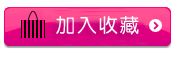
<style>
.page{position:relative;width:179px;height:58px;background:#ffffff}
.page>*{position:absolute;margin:0}
.t1{font:19.3px "FZY3JW--GB1-0";letter-spacing:0.1em;color:#ffffff}
</style>
<div class="page">
<p class="t1" style="left:56px;top:16px;width:83px;height:19px">加入收藏</p>
</div>
